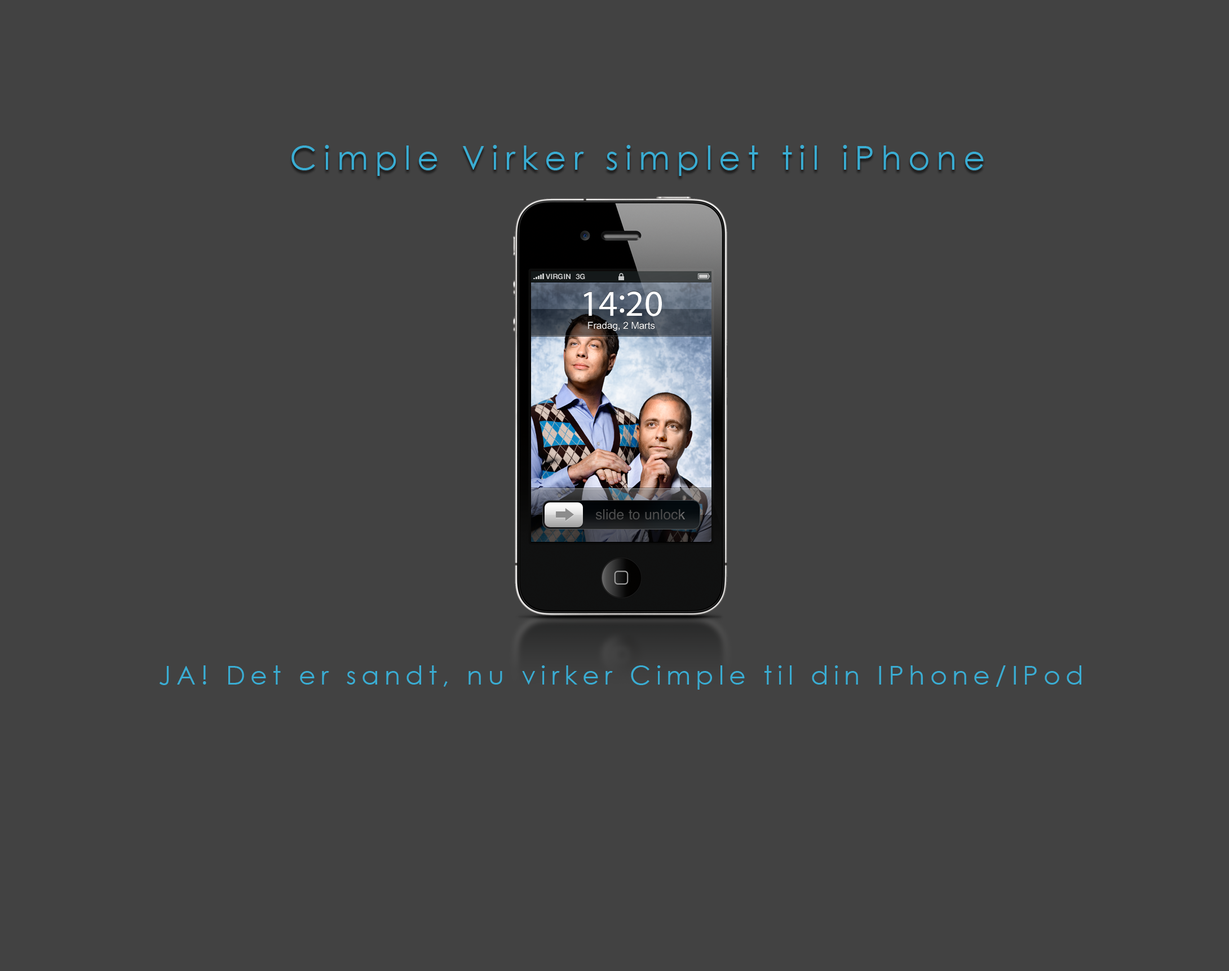
<style>
.page{position:relative;width:1229px;height:971px;background:#424242}
.page>*{position:absolute;margin:0}
.t1{font:33.3px "CenturyGothic";letter-spacing:0.2em;color:#3aadd3}
.t2{font:7.3px "HelveticaNeue-Bold";color:#c4c5c6;text-transform:uppercase}
.t3{font:36.6px "MyriadPro-Regular";color:#ffffff}
.t4{font:9.6px "ArialUnicodeMS";color:#ffffff}
.t5{font:25.9px "CenturyGothic";letter-spacing:0.2em;color:#3aadd3}
</style>
<div class="page">
<p class="t1" style="left:291px;top:145px;width:692px;height:31px">Cimple Virker simplet til iPhone</p>
<p class="t2" style="left:546px;top:273px;width:24px;height:7px">VIRGIN</p>
<p class="t2" style="left:575px;top:273px;width:10px;height:7px">3G</p>
<p class="t3" style="left:583px;top:291px;width:79px;height:25px">14:20</p>
<p class="t4" style="left:588px;top:321px;width:67px;height:10px">Fradag, 2 Marts</p>
<p class="t5" style="left:159px;top:665px;width:922px;height:24px">JA! Det er sandt, nu virker Cimple til din IPhone/IPod</p>
</div>
